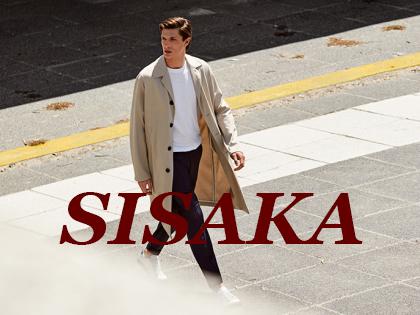
<style>
.page{position:relative;width:420px;height:315px}
.page>*{position:absolute;margin:0}
.t1{font:74px "Georgia-BoldItalic";color:#650000}
</style>
<div class="page">
<p class="t1" style="left:59px;top:192px;width:304px;height:53px">SISAKA</p>
</div>
